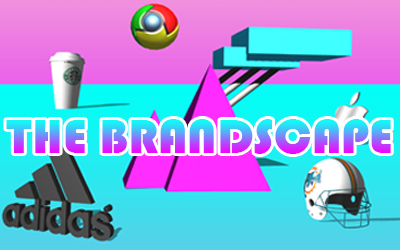
<style>
.page{position:relative;width:400px;height:250px}
.page>*{position:absolute;margin:0}
.t1{font:50px "Bauhaus93"}
</style>
<div class="page">
<p class="t1" style="left:6px;top:119px;width:385px;height:35px">THE BRANDSCAPE</p>
</div>
